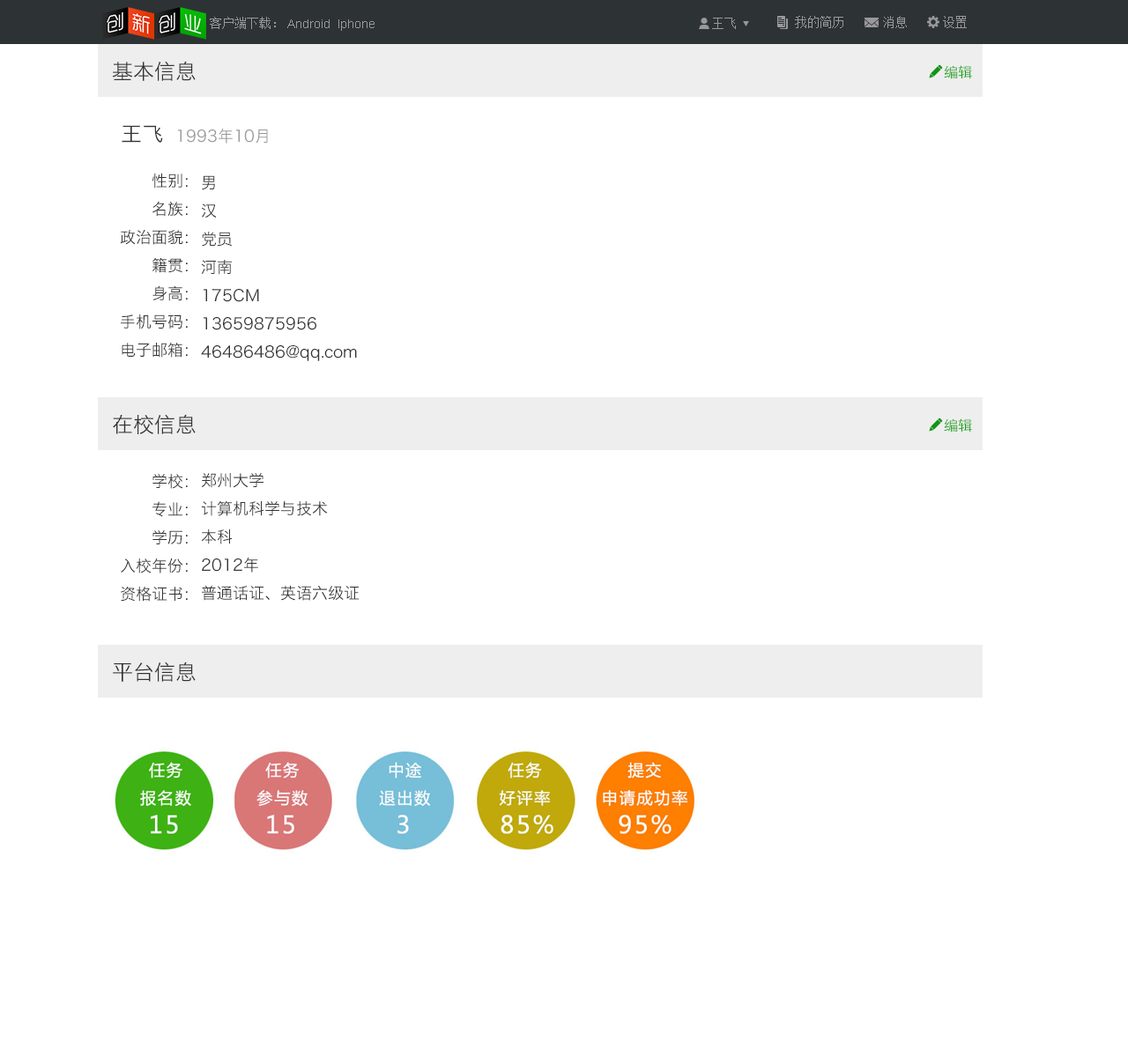
<style>
.page{position:relative;width:1128px;height:1057px;background:#ffffff}
.page>*{position:absolute;margin:0}
.t1{font:12.3px "SimSun";color:#999999}
.t2{font:12.3px "ArialMT";color:#999999}
.t3{font:21.1px "HiraginoSansGB-W3";color:#333333}
.t4{font:14.1px "HiraginoSansGB-W3";color:#10a110}
.t5{font:15.9px "HiraginoSansGB-W3";color:#999999}
.t6{font:15.9px/28.2px "HiraginoSansGB-W3";color:#333333}
</style>
<div class="page">
<p class="t1" style="left:210px;top:17px;width:66px;height:12px">客户端下载：</p>
<p class="t1" style="left:712px;top:18px;width:24px;height:11px">王飞</p>
<p class="t1" style="left:795px;top:16px;width:48px;height:12px">我的简历</p>
<p class="t1" style="left:883px;top:16px;width:24px;height:12px">消息</p>
<p class="t1" style="left:943px;top:16px;width:24px;height:12px">设置</p>
<p class="t2" style="left:287px;top:19px;width:87px;height:12px">Android  Iphone</p>
<p class="t3" style="left:112px;top:61px;width:84px;height:20px">基本信息</p>
<p class="t4" style="left:944px;top:65px;width:28px;height:14px">编辑</p>
<p class="t3" style="left:122px;top:125px;width:41px;height:18px">王飞</p>
<p class="t5" style="left:178px;top:129px;width:90px;height:15px">1993年10月</p>
<p class="t6" style="left:120px;top:173px;width:68px;height:185px;text-align:right">性别：<br>名族：<br>政治面貌：<br>籍贯：<br>身高：<br>手机号码：<br>电子邮箱：</p>
<p class="t6" style="left:201px;top:175px;width:156px;height:186px">男<br>汉<br>党员<br>河南<br>175CM<br>13659875956<br>46486486@qq.com</p>
<p class="t3" style="left:113px;top:414px;width:83px;height:20px">在校信息</p>
<p class="t4" style="left:944px;top:419px;width:28px;height:14px">编辑</p>
<p class="t6" style="left:201px;top:473px;width:158px;height:128px">郑州大学<br>计算机科学与技术<br>本科<br>2012年<br>普通话证、英语六级证</p>
<p class="t6" style="left:121px;top:474px;width:67px;height:128px;text-align:right">学校：<br>专业：<br>学历：<br>入校年份：<br>资格证书：</p>
<p class="t3" style="left:113px;top:662px;width:83px;height:20px">平台信息</p>
</div>
